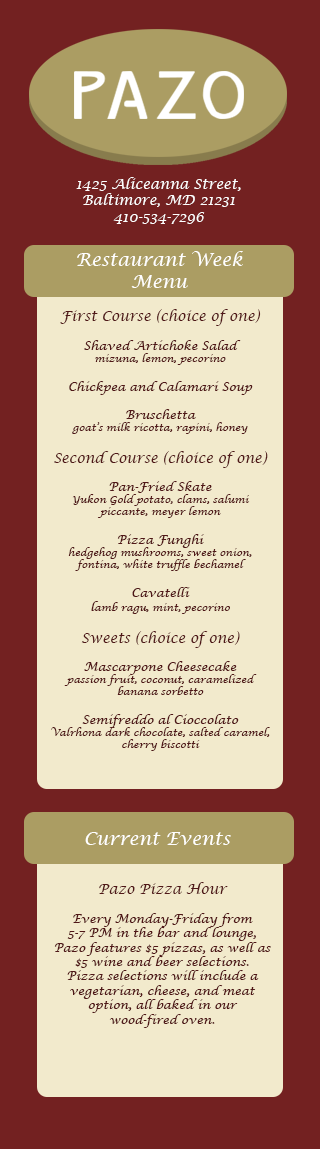
<style>
.page{position:relative;width:320px;height:1149px;background:#f2eacc}
.page>*{position:absolute;margin:0}
.t1{font:14px "LucidaCalligraphy-Italic";color:#ffffff}
.t2{font:18px "LucidaCalligraphy-Italic";color:#ffffff}
.t3{font:10px "LucidaCalligraphy-Italic";color:#501717}
.t4{font:14px "LucidaCalligraphy-Italic";color:#501717}
.t5{font:12px "LucidaCalligraphy-Italic";color:#501717}
</style>
<div class="page">
<p class="t1" style="left:76px;top:177px;width:165px;height:47px;text-align:center">1425 Aliceanna Street, Baltimore, MD 21231 410-534-7296</p>
<p class="t2" style="left:77px;top:251px;width:166px;height:37px;text-align:center">Restaurant Week <br>Menu</p>
<p class="t3" style="left:51px;top:309px;width:219px;height:442px;text-align:center"><span class="t4">First Course (choice of one)<br></span><span class="t5"><br>Shaved Artichoke Salad<br></span>mizuna, lemon, pecorino<br><span class="t5"><br>Chickpea and Calamari Soup<br><br>Bruschetta<br></span>goat’s milk ricotta, rapini, honey<br><br><span class="t4">Second Course (choice of one)<br></span><span class="t5"><br>Pan-Fried Skate<br></span>Yukon Gold potato, clams, salumi <br>piccante, meyer lemon<br><span class="t5"><br>Pizza Funghi<br></span>hedgehog mushrooms, sweet onion, <br>fontina, white truffle bechamel<br><span class="t5"><br>Cavatelli<br>l</span>amb ragu, mint, pecorino<br><br><span class="t4">Sweets (choice of one)<br></span><span class="t5"><br>Mascarpone Cheesecake<br></span>passion fruit, coconut, caramelized banana sorbetto<br><span class="t5"><br>Semifreddo al Cioccolato<br></span>Valrhona dark chocolate, salted caramel, <br>cherry biscotti</p>
<p class="t2" style="left:85px;top:832px;width:146px;height:13px">Current Events</p>
<p class="t5" style="left:54px;top:882px;width:217px;height:146px;text-align:center"><span class="t4">Pazo Pizza Hour<br></span><br>Every Monday-Friday from <br>5-7 PM in the bar and lounge, Pazo features $5 pizzas, as well as $5 wine and beer selections. <br>Pizza selections will include a <br>vegetarian, cheese, and meat option, all baked in our <br>wood-fired oven.</p>
</div>
